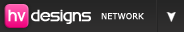
<style>
.page{position:relative;width:184px;height:32px}
.page>*{position:absolute;margin:0}
.t1{font:14px "Swatchit";color:#ffffff;font-weight:bold}
.t2{font:8px "Verdana";color:#ffffff;font-weight:bold}
</style>
<div class="page">
<p class="t1" style="left:8px;top:9px;width:83px;height:15px">HV DESIGNS</p>
<p class="t2" style="left:101px;top:13px;width:43px;height:7px">NETWORK</p>
</div>
